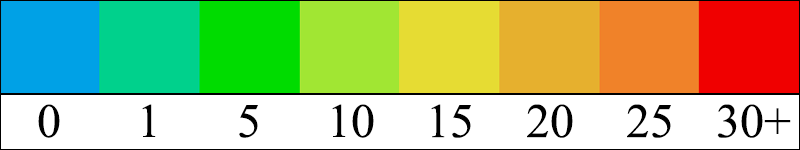
<style>
.page{position:relative;width:800px;height:150px;background:#ffffff}
.page>*{position:absolute;margin:0}
.t1{font:48px "TimesNewRomanPSMT";color:#000000}
.t2{font:48.3px "TimesNewRomanPSMT";color:#000000}
</style>
<div class="page">
<p class="t1" style="left:38px;top:104px;width:22px;height:34px">0</p>
<p class="t1" style="left:142px;top:104px;width:14px;height:33px">1</p>
<p class="t1" style="left:239px;top:105px;width:19px;height:33px">5</p>
<p class="t1" style="left:332px;top:104px;width:42px;height:34px">10</p>
<p class="t2" style="left:431px;top:104px;width:40px;height:34px">15</p>
<p class="t2" style="left:527px;top:104px;width:46px;height:34px">20</p>
<p class="t2" style="left:627px;top:104px;width:44px;height:34px">25</p>
<p class="t2" style="left:717px;top:104px;width:74px;height:34px">30+</p>
</div>
